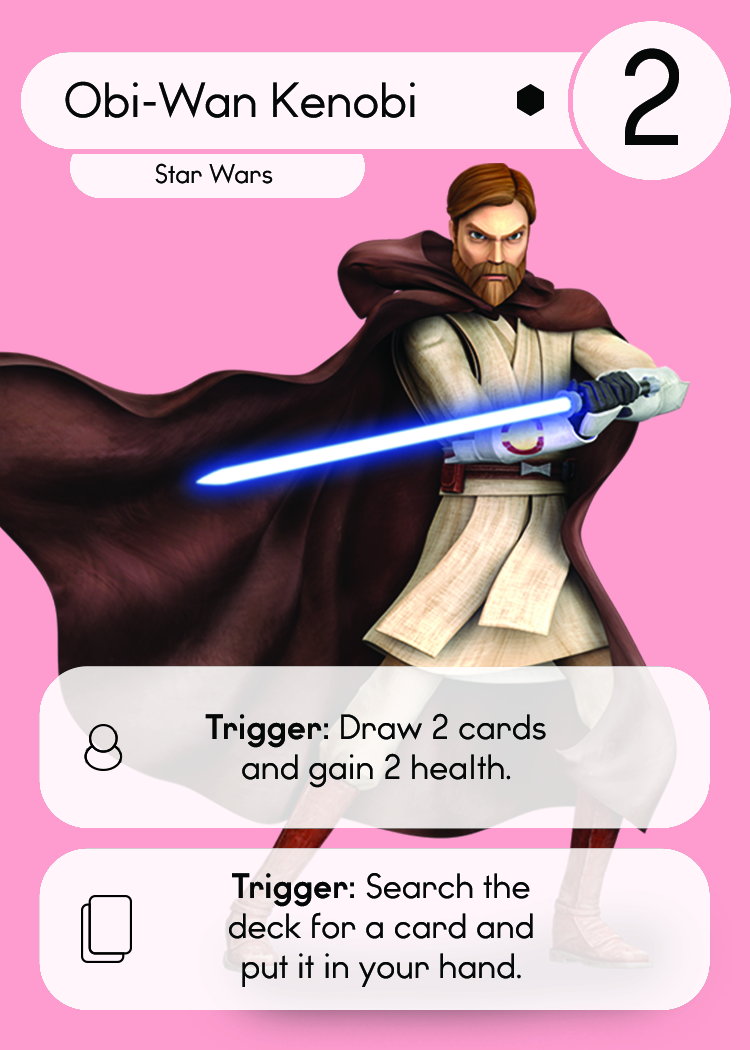
<style>
.page{position:relative;width:750px;height:1050px;background:#ff9ccf}
.page>*{position:absolute;margin:0}
.t1{font:127.3px "WatchwordRegularDemo";color:#060808}
.t2{font:46.7px "WatchwordRegularDemo";color:#060808}
.t3{font:25.5px "WatchwordRegularDemo";color:#060808}
.t4{font:33.3px "WatchwordRegularDemo";color:#060808}
.t5{font:33.3px "WatchwordBoldDemo";color:#060808}
.t6{font:33.3px "Dosis-Medium";color:#060808}
</style>
<div class="page">
<p class="t1" style="left:625px;top:48px;width:54px;height:97px">2</p>
<p class="t2" style="left:65px;top:81px;width:350px;height:37px">Obi-Wan Kenobi</p>
<p class="t3" style="left:155px;top:163px;width:118px;height:21px">Star Wars</p>
<p class="t4" style="left:205px;top:713px;width:341px;height:75px;text-align:center"><span class="t5">Trigger: </span>Draw 2 cards<br>and gain 2 health<span class="t6">.</span></p>
<p class="t4" style="left:229px;top:873px;width:304px;height:114px;text-align:center"><span class="t5">Trigger: </span>Search the<br>deck for a card and<br>put it in your hand<span class="t6">.</span></p>
</div>
